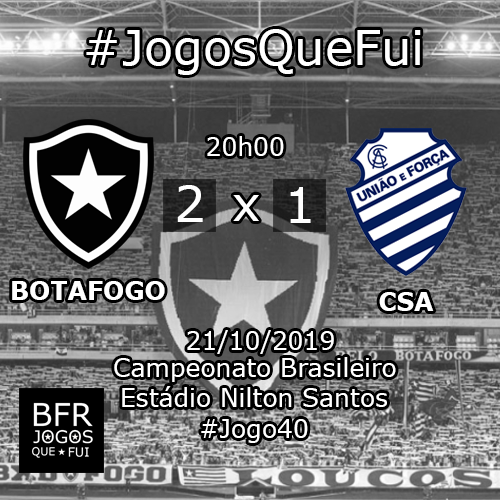
<style>
.page{position:relative;width:500px;height:500px}
.page>*{position:absolute;margin:0}
.t1{font:48px "Verdana";color:#ffffff}
.t2{font:25px "Verdana";color:#ffffff}
.t3{font:49.5px "Verdana";color:#ffffff}
.t4{font:25px "Verdana-Bold";color:#ffffff}
</style>
<div class="page">
<p class="t1" style="left:86px;top:29px;width:335px;height:46px">#JogosQueFui</p>
<p class="t2" style="left:207px;top:136px;width:77px;height:20px">20h00</p>
<p class="t3" style="left:177px;top:185px;width:26px;height:37px">2</p>
<p class="t1" style="left:233px;top:195px;width:26px;height:26px">x</p>
<p class="t3" style="left:290px;top:187px;width:21px;height:36px">1</p>
<p class="t4" style="left:12px;top:281px;width:153px;height:19px">BOTAFOGO</p>
<p class="t4" style="left:379px;top:292px;width:55px;height:19px">CSA</p>
<p class="t2" style="left:187px;top:330px;width:147px;height:24px">21/10/2019</p>
<p class="t2" style="left:114px;top:357px;width:282px;height:25px">Campeonato Brasileiro</p>
<p class="t2" style="left:122px;top:386px;width:265px;height:21px">Estádio Nilton Santos</p>
<p class="t2" style="left:201px;top:419px;width:107px;height:24px">#Jogo40</p>
</div>
